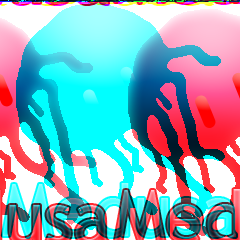
<style>
.page{position:relative;width:240px;height:240px}
.page>*{position:absolute;margin:0}
.t1{font:72px "TrebuchetMS"}
</style>
<div class="page">
<p class="t1" style="left:2px;top:181px;width:234px;height:54px">Medusa</p>
</div>
